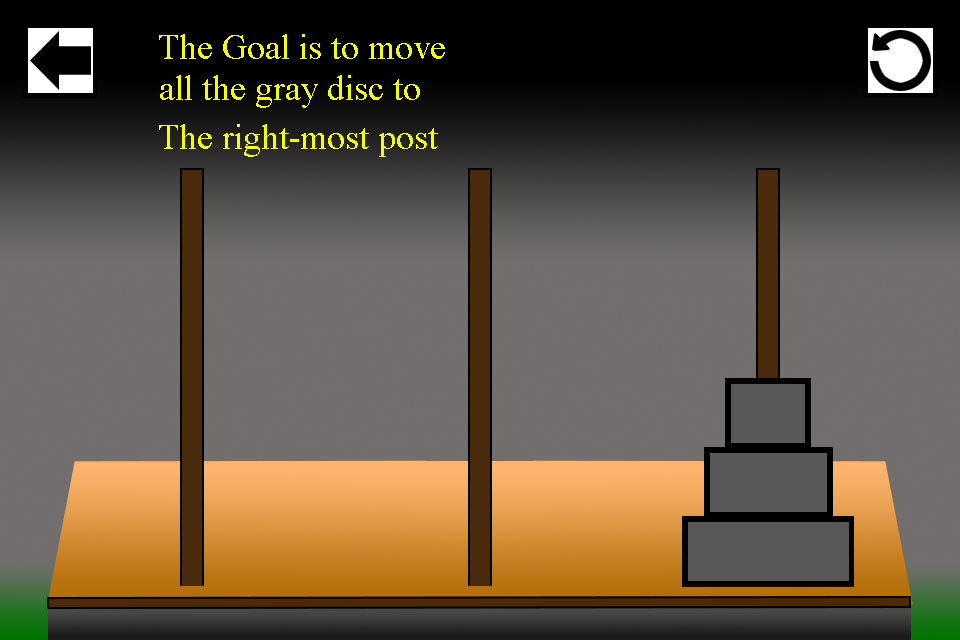
<style>
.page{position:relative;width:960px;height:640px}
.page>*{position:absolute;margin:0}
.t1{font:36px "TimesNewRomanPSMT";color:#f6ff00}
</style>
<div class="page">
<p class="t1" style="left:159px;top:34px;width:286px;height:25px">The Goal is to move</p>
<p class="t1" style="left:160px;top:75px;width:260px;height:33px">all the gray disc to</p>
<p class="t1" style="left:159px;top:124px;width:279px;height:33px">The right-most post</p>
</div>
